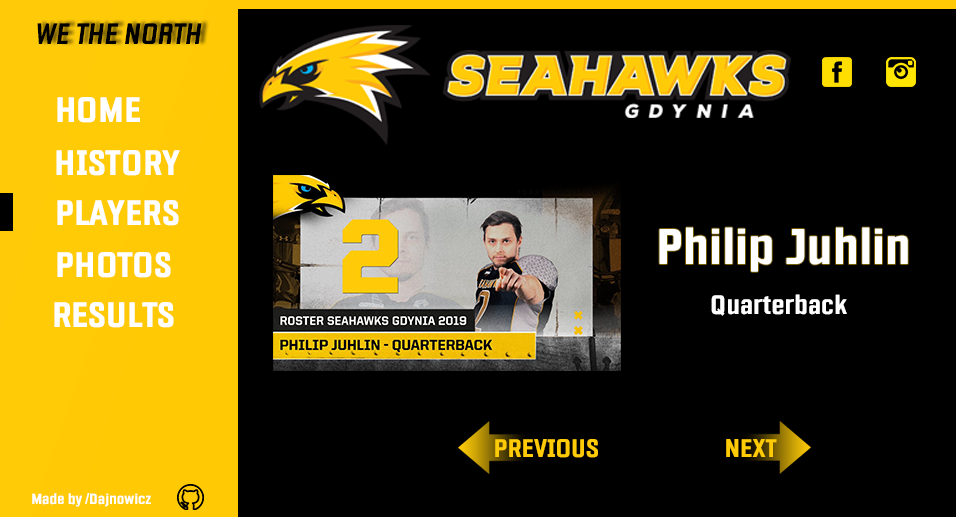
<style>
.page{position:relative;width:956px;height:517px;background:#000000}
.page>*{position:absolute;margin:0}
.t1{font:30px "Fragua-BoldItalic";color:#000000}
.t2{font:36px "Fragua-Bold";color:#ffffff}
.t3{font:51px "Fragua-Bold";color:#ffffff}
.t4{font:27px "Fragua-Bold";color:#ffffff}
.t5{font:26px "Fragua-Bold";color:#ffcb07}
.t6{font:15px "Fragua-Bold";color:#ffffff}
</style>
<div class="page">
<p class="t1" style="left:37px;top:23px;width:165px;height:21px">WE THE NORTH</p>
<p class="t2" style="left:57px;top:97px;width:83px;height:26px">HOME</p>
<p class="t2" style="left:56px;top:150px;width:124px;height:26px">HISTORY</p>
<p class="t2" style="left:57px;top:200px;width:122px;height:26px">PLAYERS</p>
<p class="t3" style="left:659px;top:227px;width:249px;height:45px">Philip Juhlin</p>
<p class="t2" style="left:57px;top:252px;width:114px;height:26px">PHOTOS</p>
<p class="t4" style="left:711px;top:294px;width:136px;height:22px">Quarterback</p>
<p class="t2" style="left:54px;top:302px;width:120px;height:26px">RESULTS</p>
<p class="t5" style="left:495px;top:439px;width:103px;height:19px">PREVIOUS</p>
<p class="t5" style="left:726px;top:439px;width:51px;height:18px">NEXT</p>
<p class="t6" style="left:32px;top:493px;width:119px;height:14px">Made by /Dajnowicz</p>
</div>
